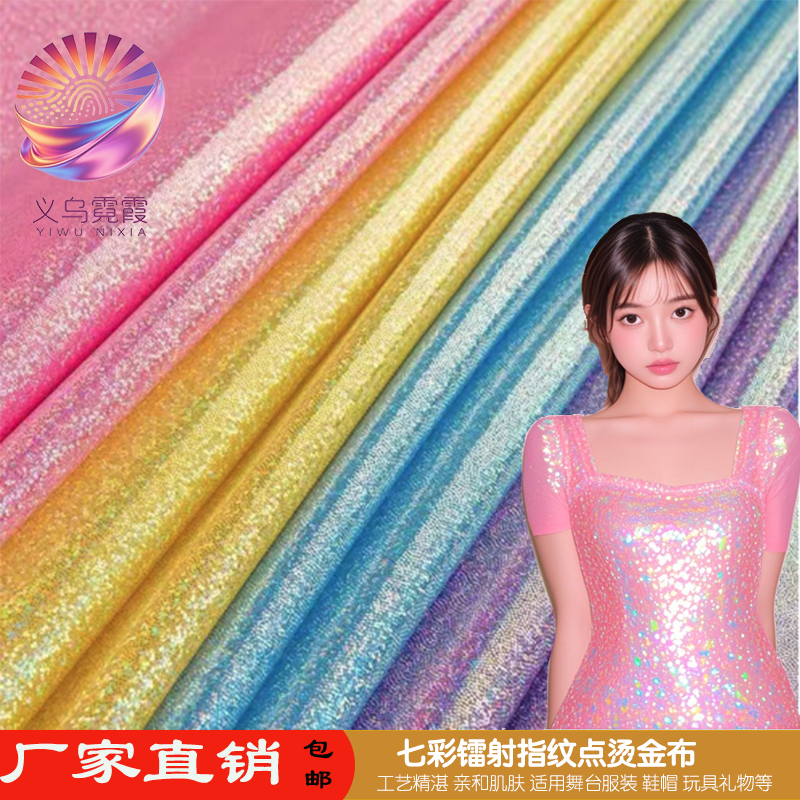
<style>
.page{position:relative;width:800px;height:800px}
.page>*{position:absolute;margin:0}
.t1{font:72px "STBaoliSC-Regular";color:#edf6f0}
.t2{font:30px/30px "STBaoliSC-Regular";color:#070707}
.t3{font:30px "STYuanti-SC-Bold";color:#ffffff}
.t4{font:30px "STBaoliSC-Regular";color:#070707}
.t5{font:18px "STYuanti-SC-Light";color:#ffffff}
</style>
<div class="page">
<p class="t1" style="left:0px;top:738px;width:280px;height:47px">厂家直销</p>
<p class="t2" style="left:303px;top:739px;width:30px;height:50px;text-align:center">包<br>   邮</p>
<p class="t3" style="left:397px;top:738px;width:299px;height:30px"><span class="t4">                                 </span>七彩镭射指纹点烫金布</p>
<p class="t5" style="left:377px;top:774px;width:396px;height:18px">工艺精湛 亲和肌肤 适用舞台服装 鞋帽 玩具礼物等</p>
</div>
